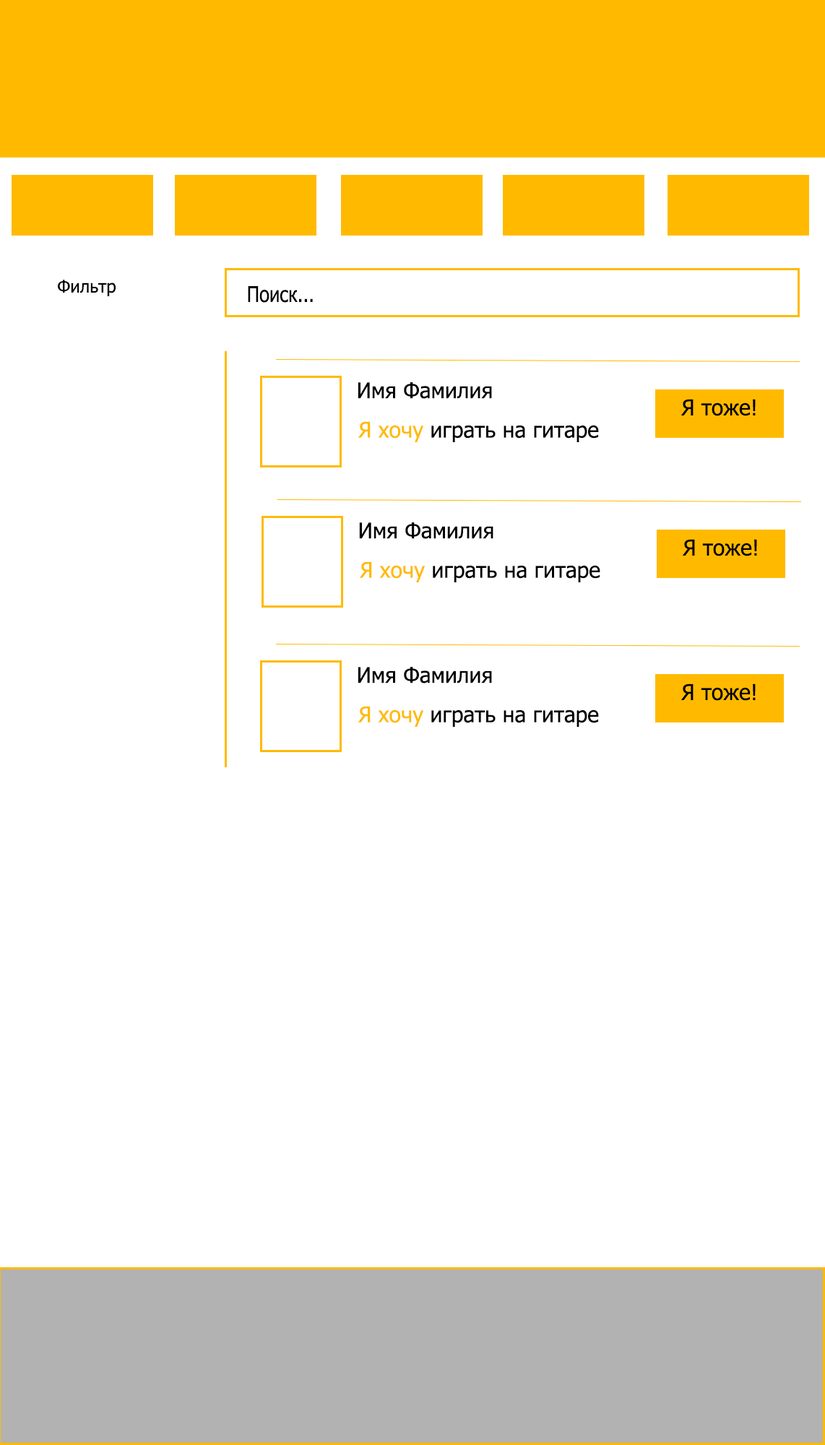
<style>
.page{position:relative;width:825px;height:1445px;background:#ffffff}
.page>*{position:absolute;margin:0}
.t1{font:17.3px "Tahoma";color:#000000}
.t2{font:21.7px "Tahoma";color:#000000;scale:0.85 1}
.t3{font:21.5px "Tahoma";color:#000000}
.t4{font:21.7px "Tahoma";color:#000000}
.t5{font:21.7px "Tahoma";color:#ffba00}
</style>
<div class="page">
<p class="t1" style="left:58px;top:280px;width:58px;height:16px">Фильтр</p>
<p class="t2" style="left:248px;top:286px;width:65px;height:17px">Поиск...</p>
<p class="t3" style="left:358px;top:382px;width:134px;height:17px">Имя Фамилия</p>
<p class="t4" style="left:681px;top:399px;width:75px;height:17px">Я тоже!</p>
<p class="t4" style="left:358px;top:421px;width:241px;height:21px"><span class="t5">Я хочу</span> играть на гитаре</p>
<p class="t3" style="left:359px;top:522px;width:135px;height:17px">Имя Фамилия</p>
<p class="t4" style="left:683px;top:539px;width:74px;height:17px">Я тоже!</p>
<p class="t4" style="left:359px;top:561px;width:241px;height:21px"><span class="t5">Я хочу</span> играть на гитаре</p>
<p class="t3" style="left:358px;top:667px;width:134px;height:17px">Имя Фамилия</p>
<p class="t4" style="left:681px;top:684px;width:75px;height:17px">Я тоже!</p>
<p class="t4" style="left:358px;top:706px;width:241px;height:21px"><span class="t5">Я хочу</span> играть на гитаре</p>
</div>
